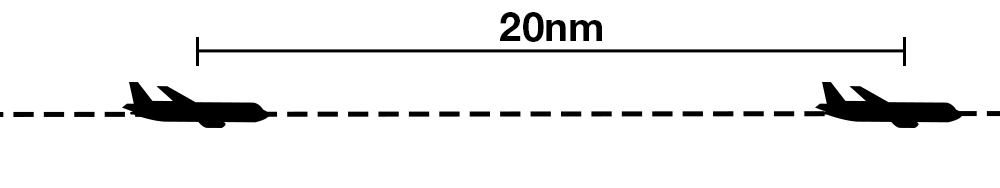
<style>
.page{position:relative;width:1000px;height:188px;background:#ffffff}
.page>*{position:absolute;margin:0}
.t1{font:40px "HelveticaNeueLTStd-Bd";color:#000000}
</style>
<div class="page">
<p class="t1" style="left:500px;top:12px;width:102px;height:30px">20nm</p>
</div>
